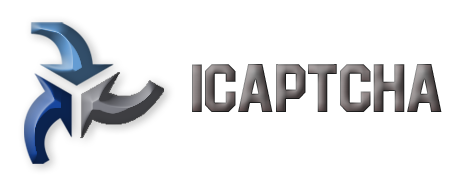
<style>
.page{position:relative;width:454px;height:189px;background:#ffffff}
.page>*{position:absolute;margin:0}
.t1{font:68.2px "AdidasHalfBlock2016"}
</style>
<div class="page">
<p class="t1" style="left:192px;top:64px;width:250px;height:48px">ICAPTCHA</p>
</div>
